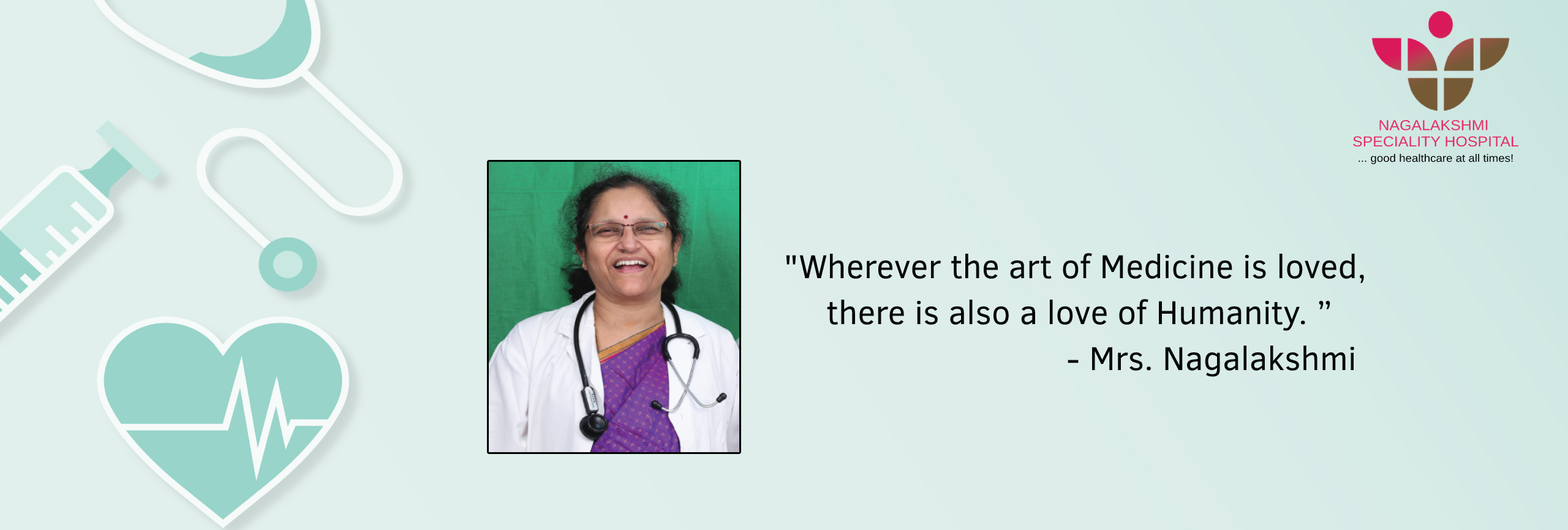
<style>
.page{position:relative;width:1568px;height:530px}
.page>*{position:absolute;margin:0}
.t1{font:14.5px/16.3px "ArialMT";color:#e52e66;scale:1.06 1}
.t2{font:10.8px "ArialMT";color:#060808;scale:1.06 1}
.t3{font:33.7px/45.9px "ClearSans";color:#060808}
</style>
<div class="page">
<p class="t1" style="left:1353px;top:120px;width:165px;height:27px;text-align:center">NAGALAKSHMI <br>SPECIALITY HOSPITAL</p>
<p class="t2" style="left:1359px;top:154px;width:154px;height:10px">... good healthcare at all times!</p>
<p class="t3" style="left:786px;top:253px;width:578px;height:124px;text-align:center">"Wherever the art of Medicine is loved,<br> there is also a love of Humanity. ”<br>                              - Mrs. Nagalakshmi</p>
</div>
